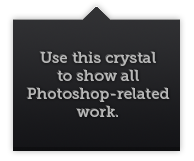
<style>
.page{position:relative;width:194px;height:161px}
.page>*{position:absolute;margin:0}
.t1{font:15px "MuseoSlab-500";letter-spacing:0.02em;color:#b8b8b8}
</style>
<div class="page">
<p class="t1" style="left:27px;top:52px;width:143px;height:65px;text-align:center">Use this crystal<br>to show all<br>Photoshop-related<br>work.</p>
</div>
